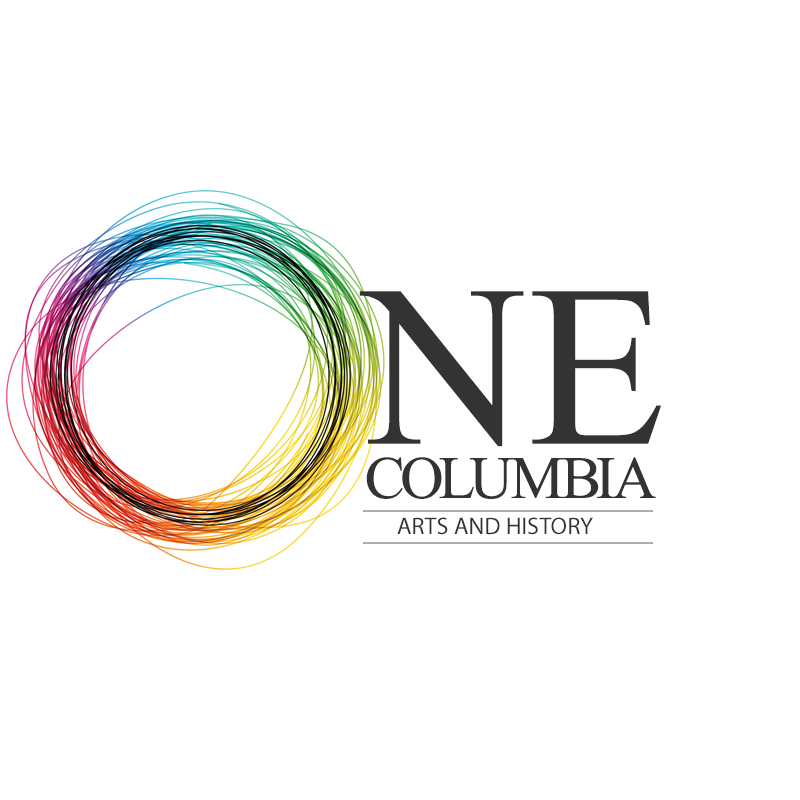
<style>
.page{position:relative;width:800px;height:800px;background:#ffffff}
.page>*{position:absolute;margin:0}
.t1{font:230px "TimesNewRomanPSMT";color:#333333}
.t2{font:60px "TimesNewRomanPSMT";letter-spacing:-0.05em;color:#333333}
.t3{font:24px "MyriadPro-Regular";letter-spacing:0.01em;color:#333333}
</style>
<div class="page">
<p class="t1" style="left:359px;top:291px;width:302px;height:156px">NE</p>
<p class="t2" style="left:366px;top:457px;width:290px;height:42px">COLUMBIA</p>
<p class="t3" style="left:397px;top:517px;width:196px;height:18px">ARTS AND HISTORY</p>
</div>
